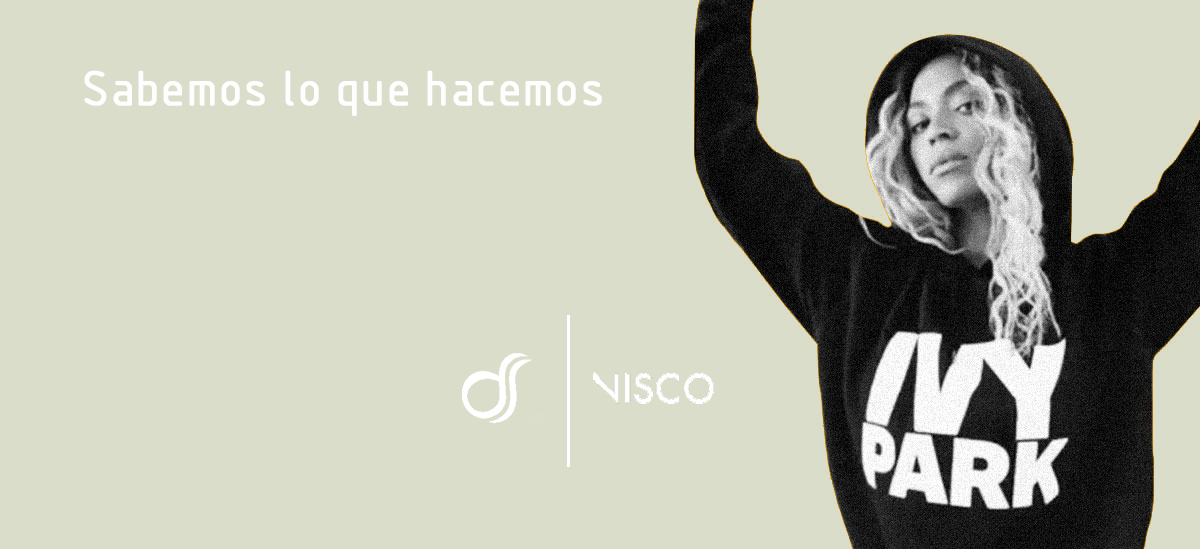
<style>
.page{position:relative;width:1200px;height:549px;background:#daddc9}
.page>*{position:absolute;margin:0}
.t1{font:48px "GOST-Common";color:#fefefe;font-weight:bold}
</style>
<div class="page">
<p class="t1" style="left:84px;top:70px;width:518px;height:46px">Sabemos lo que hacemos</p>
</div>
